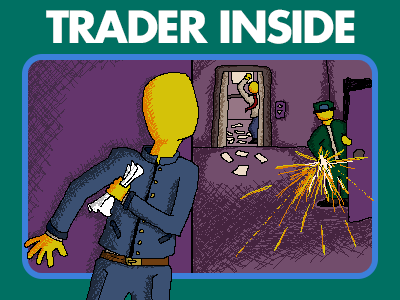
<style>
.page{position:relative;width:400px;height:300px;background:#007062}
.page>*{position:absolute;margin:0}
.t1{font:43.3px "Futura-Bold";letter-spacing:-0.05em;color:#ffffff}
</style>
<div class="page">
<p class="t1" style="left:46px;top:9px;width:309px;height:35px">TRADER INSIDE</p>
</div>
